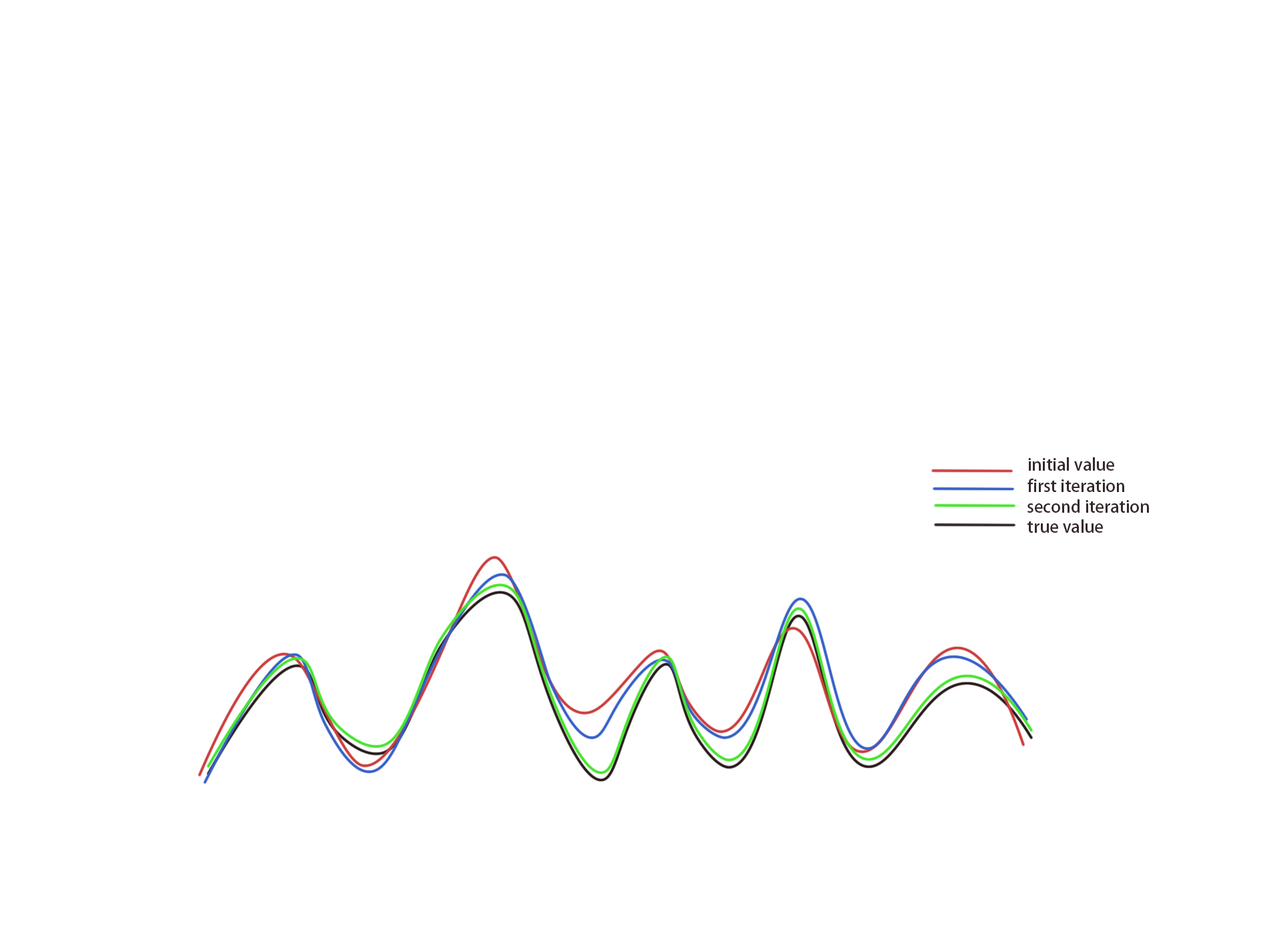
<style>
.page{position:relative;width:1261px;height:946px;background:#ffffff}
.page>*{position:absolute;margin:0}
.t1{font:16.7px "AdobeHeitiStd-Regular";color:#352828}
</style>
<div class="page">
<p class="t1" style="left:1028px;top:457px;width:86px;height:13px">initial value</p>
<p class="t1" style="left:1028px;top:478px;width:96px;height:14px">first iteration</p>
<p class="t1" style="left:1028px;top:499px;width:121px;height:13px">second iteration</p>
<p class="t1" style="left:1028px;top:519px;width:75px;height:13px">true value</p>
</div>
